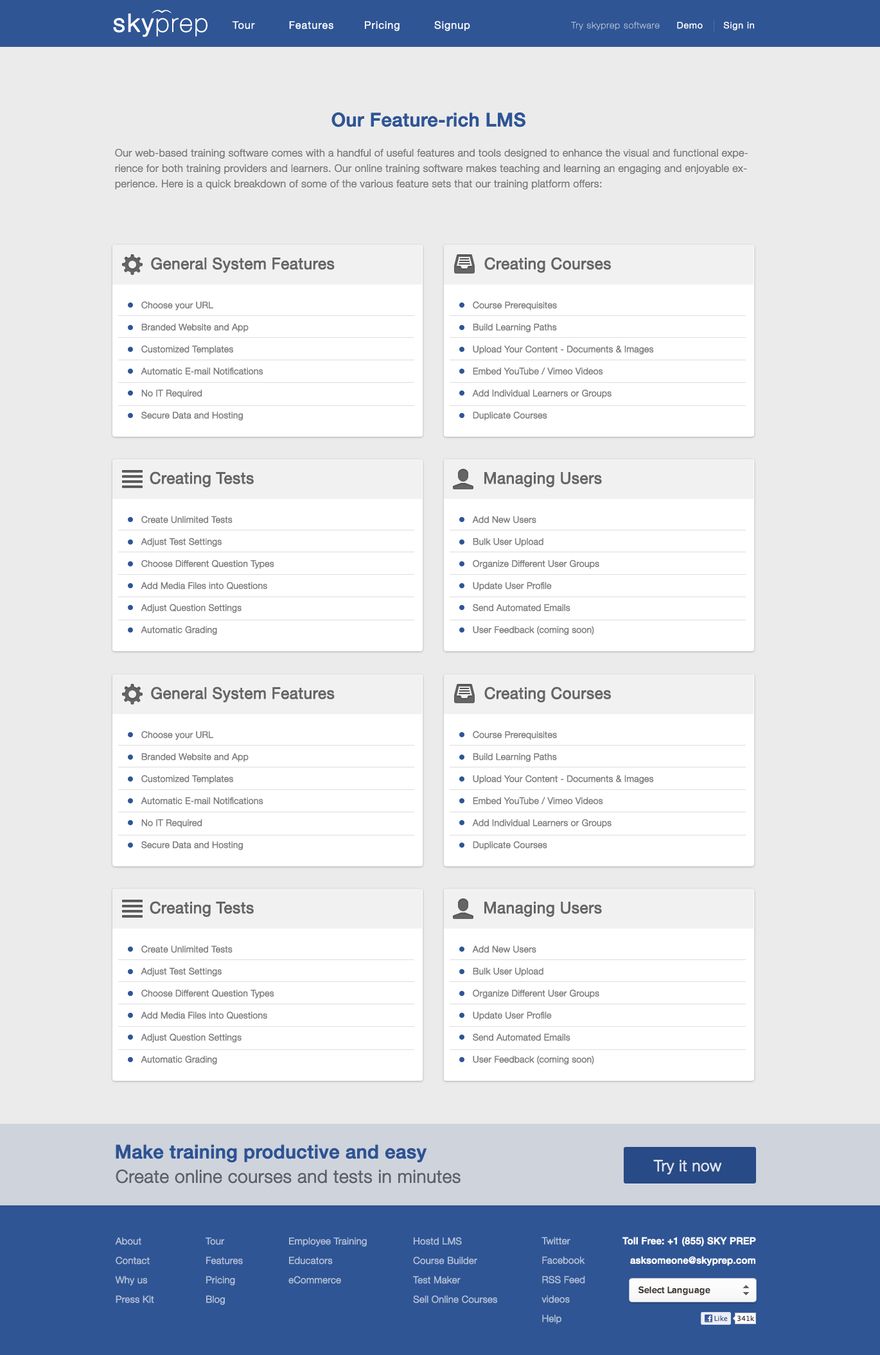
<style>
.page{position:relative;width:880px;height:1355px;background:#ebebeb}
.page>*{position:absolute;margin:0}
.t1{font:18.6px "HelveticaNeue-Medium";color:#2f5595;font-weight:bold}
.t2{font:10.3px/15.4px "HelveticaNeue-Light";color:#7c7c7c;font-weight:bold}
.t3{font:15.8px "HelveticaNeue";color:#656565;font-weight:bold}
.t4{font:9px/22px "HelveticaNeue-Light";color:#7c7c7c;font-weight:bold}
.t5{font:18.6px "HelveticaNeue-Medium";color:#2e5393;font-weight:bold}
.t6{font:17.8px "HelveticaNeue-Light";color:#5c616a;font-weight:bold}
.t7{font:15.4px "HelveticaNeue-Light";color:#dfe4ed;font-weight:bold}
.t8{font:9.5px/19.4px "HelveticaNeue-Light";color:#b4c0d6;font-weight:bold}
.t9{font:9.5px/19.4px "HelveticaNeue-Medium";color:#ffffff;font-weight:bold}
.t10{font:9.6px "ProximaNova-Semibold";color:#404040}
</style>
<div class="page">
<p class="t1" style="left:331px;top:112px;width:194px;height:15px">Our Feature-rich LMS</p>
<p class="t2" style="left:115px;top:148px;width:633px;height:42px">Our web-based training software comes with a handful of useful features and tools designed to enhance the visual and functional experience for both training providers and learners. Our online training software makes teaching and learning an engaging and enjoyable experience. Here is a quick breakdown of some of the various feature sets that our training platform offers:</p>
<p class="t3" style="left:151px;top:257px;width:184px;height:16px">General System Features</p>
<p class="t3" style="left:484px;top:257px;width:127px;height:16px">Creating Courses</p>
<p class="t4" style="left:141px;top:301px;width:122px;height:120px">Choose your URL<br>Branded Website and App<br>Customized Templates<br>Automatic E-mail Notifications<br>No IT Required<br>Secure Data and Hosting</p>
<p class="t4" style="left:472px;top:301px;width:182px;height:120px">Course Prerequisites<br>Build Learning Paths<br>Upload Your Content - Documents &amp; Images<br>Embed YouTube / Vimeo Videos<br>Add Individual Learners or Groups<br>Duplicate Courses</p>
<p class="t3" style="left:150px;top:471px;width:104px;height:16px">Creating Tests</p>
<p class="t3" style="left:484px;top:472px;width:118px;height:15px">Managing Users</p>
<p class="t4" style="left:141px;top:516px;width:133px;height:119px">Create Unlimited Tests<br>Adjust Test Settings<br>Choose Different Question Types<br>Add Media Files into Questions<br>Adjust Question Settings<br>Automatic Grading</p>
<p class="t4" style="left:472px;top:516px;width:127px;height:119px">Add New Users<br>Bulk User Upload<br>Organize Different User Groups<br>Update User Profile<br>Send Automated Emails<br>User Feedback (coming soon)</p>
<p class="t3" style="left:151px;top:687px;width:184px;height:16px">General System Features</p>
<p class="t3" style="left:484px;top:687px;width:127px;height:16px">Creating Courses</p>
<p class="t4" style="left:141px;top:731px;width:122px;height:119px">Choose your URL<br>Branded Website and App<br>Customized Templates<br>Automatic E-mail Notifications<br>No IT Required<br>Secure Data and Hosting</p>
<p class="t4" style="left:472px;top:731px;width:182px;height:119px">Course Prerequisites<br>Build Learning Paths<br>Upload Your Content - Documents &amp; Images<br>Embed YouTube / Vimeo Videos<br>Add Individual Learners or Groups<br>Duplicate Courses</p>
<p class="t3" style="left:150px;top:901px;width:104px;height:16px">Creating Tests</p>
<p class="t3" style="left:484px;top:902px;width:118px;height:15px">Managing Users</p>
<p class="t4" style="left:141px;top:945px;width:133px;height:120px">Create Unlimited Tests<br>Adjust Test Settings<br>Choose Different Question Types<br>Add Media Files into Questions<br>Adjust Question Settings<br>Automatic Grading</p>
<p class="t4" style="left:472px;top:945px;width:127px;height:120px">Add New Users<br>Bulk User Upload<br>Organize Different User Groups<br>Update User Profile<br>Send Automated Emails<br>User Feedback (coming soon)</p>
<p class="t5" style="left:116px;top:1145px;width:311px;height:18px">Make training productive and easy</p>
<p class="t6" style="left:116px;top:1170px;width:345px;height:14px">Create online courses and tests in minutes</p>
<p class="t7" style="left:653px;top:1160px;width:69px;height:15px">Try it now</p>
<p class="t8" style="left:115px;top:1238px;width:39px;height:65px">About<br>Contact<br>Why us<br>Press Kit</p>
<p class="t8" style="left:206px;top:1238px;width:37px;height:67px">Tour<br>Features<br>Pricing<br>Blog</p>
<p class="t8" style="left:288px;top:1238px;width:79px;height:46px">Employee Training<br>Educators<br>eCommerce</p>
<p class="t8" style="left:413px;top:1237px;width:85px;height:66px">Hostd LMS<br>Course Builder<br>Test Maker<br>Sell Online Courses</p>
<p class="t8" style="left:541px;top:1237px;width:44px;height:87px">Twitter<br>Facebook<br>RSS Feed<br>videos<br>Help</p>
<p class="t9" style="left:622px;top:1237px;width:134px;height:29px;text-align:right">Toll Free: +1 (855) SKY PREP<br>asksomeone@skyprep.com</p>
<p class="t10" style="left:638px;top:1286px;width:72px;height:9px">Select Language</p>
</div>
